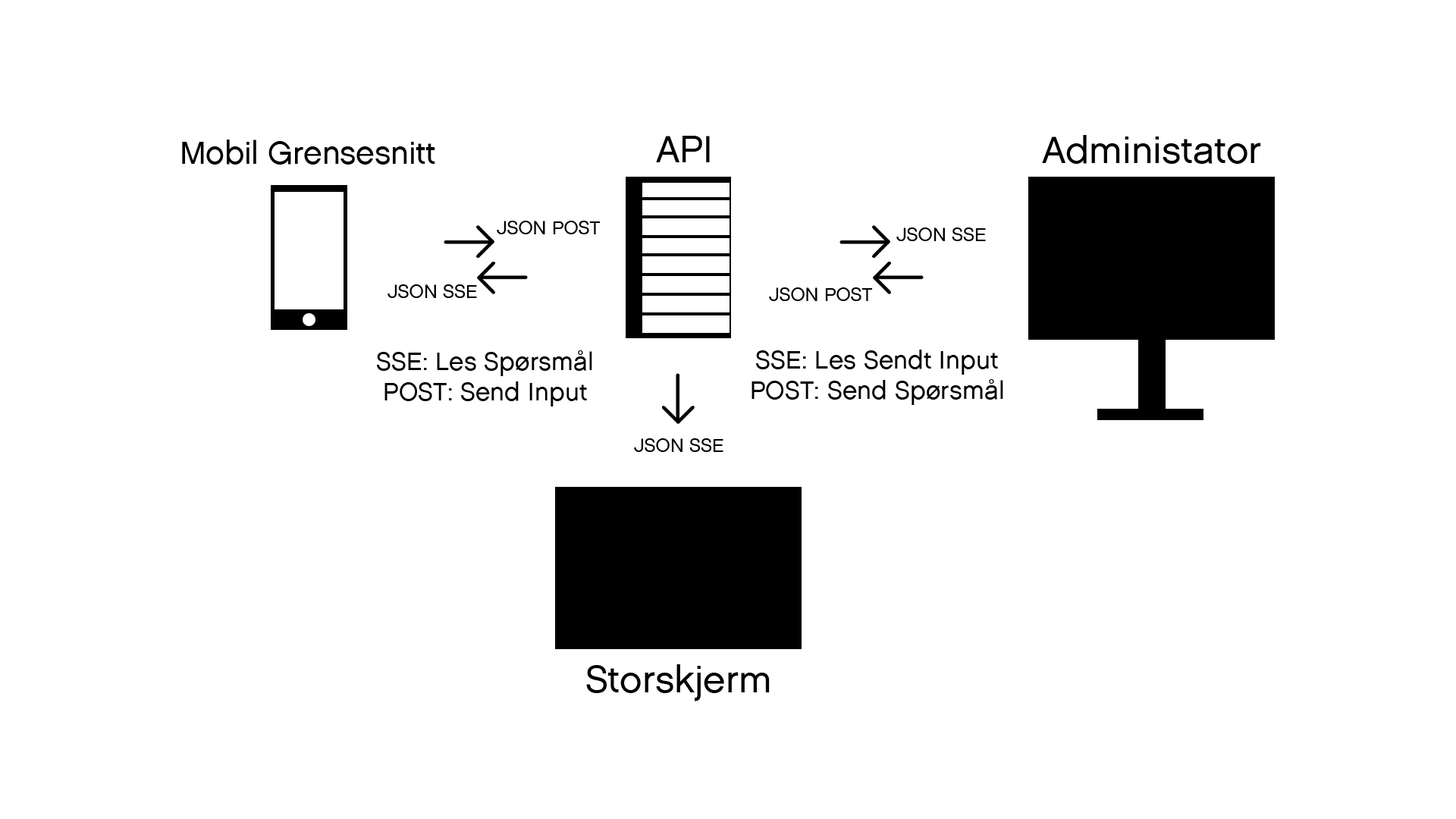
<style>
.page{position:relative;width:1456px;height:819px;background:#ffffff}
.page>*{position:absolute;margin:0}
.t1{font:37.9px "Chalet-LondonNineteenSixty";color:#000000}
.t2{font:31.6px "Chalet-LondonNineteenSixty";color:#000000}
.t3{font:19px "Chalet-LondonNineteenSixty";color:#000000}
.t4{font:25.3px "Chalet-LondonNineteenSixty";color:#000000}
</style>
<div class="page">
<p class="t1" style="left:656px;top:136px;width:54px;height:26px">API</p>
<p class="t1" style="left:1042px;top:135px;width:219px;height:29px">Administator</p>
<p class="t2" style="left:182px;top:140px;width:253px;height:25px">Mobil Grensesnitt</p>
<p class="t3" style="left:497px;top:221px;width:104px;height:13px">JSON POST</p>
<p class="t3" style="left:896px;top:227px;width:90px;height:14px">JSON SSE</p>
<p class="t3" style="left:388px;top:284px;width:89px;height:14px">JSON SSE</p>
<p class="t3" style="left:769px;top:287px;width:104px;height:14px">JSON POST</p>
<p class="t4" style="left:377px;top:350px;width:215px;height:56px;text-align:center">SSE: Les Spørsmål<br>POST: Send Input</p>
<p class="t4" style="left:751px;top:350px;width:252px;height:55px;text-align:center">SSE: Les Sendt Input<br>POST: Send Spørsmål</p>
<p class="t3" style="left:634px;top:438px;width:89px;height:14px">JSON SSE</p>
<p class="t1" style="left:586px;top:664px;width:184px;height:37px">Storskjerm</p>
</div>
